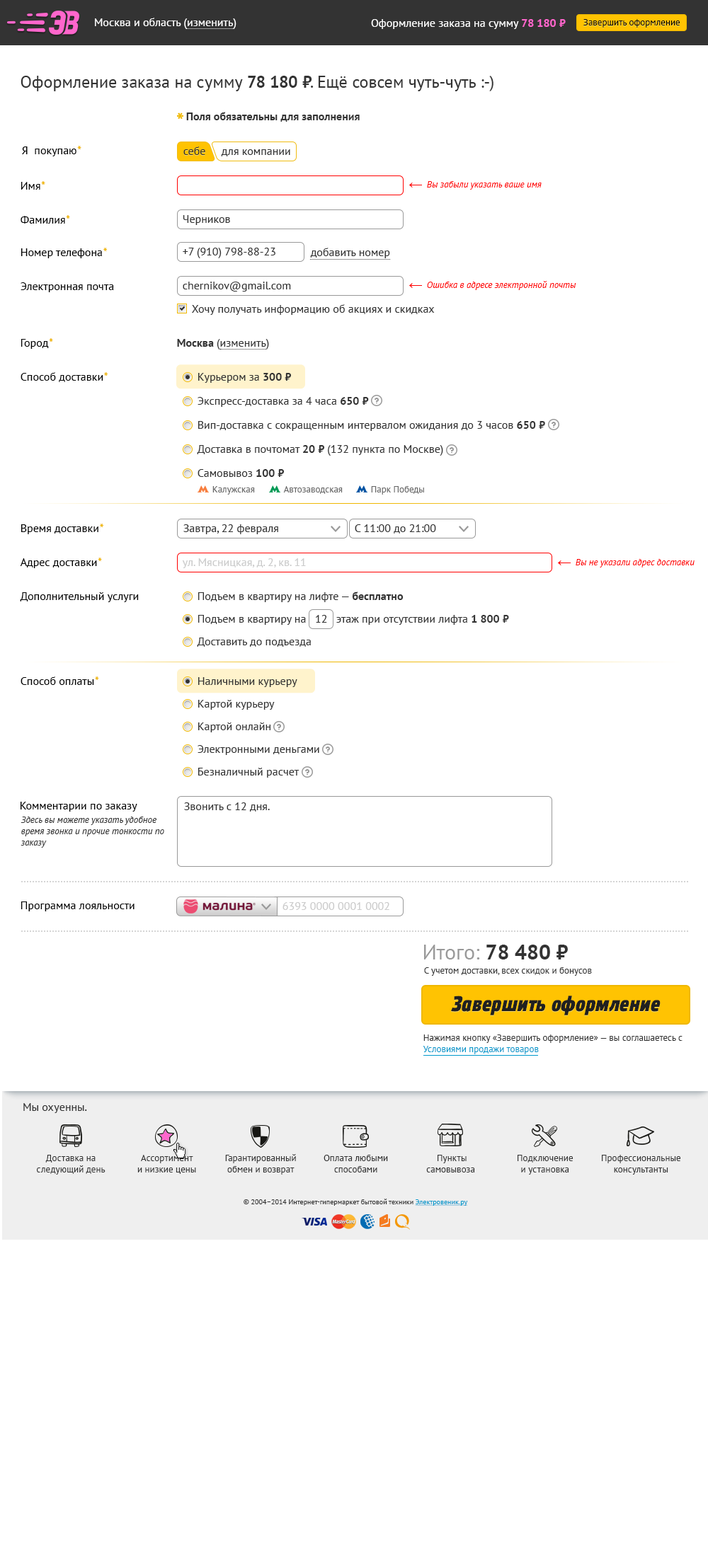
<style>
.page{position:relative;width:708px;height:1568px;background:#ffffff}
.page>*{position:absolute;margin:0}
.t1{font:11.3px "PTSans-Regular";color:#ffffff}
.t2{font:11.3px "PTSans-Bold";color:#ff66cc}
.t3{font:9.2px "PTSans-Regular";color:#000000}
.t4{font:17px "PTSans-Regular";color:#333333}
.t5{font:17px "PTSans-Bold";color:#333333}
.t6{font:11.3px "PTSans-Bold";color:#333333}
.t7{font:11.3px "PTSans-Regular";color:#000000}
.t8{font:11.3px "PTSans-BoldItalic";color:#efb700}
.t9{font:11.3px "PTSans-Regular";color:#333333}
.t10{font:9.2px "PTSans-Italic";color:#ff0000}
.t11{font:9.2px "PTSans-Regular";color:#666666}
.t12{font:11.3px "PTSans-Regular";color:#cccccc}
.t13{font:9.2px/11.3px "PTSans-Italic";color:#333333}
.t14{font:21.2px "PTSans-Bold";color:#333333}
.t15{font:21.2px "PTSans-Regular";color:#999999}
.t16{font:9.2px "PTSans-Regular";color:#333333}
.t17{font:21.2px "EtelkaNarrowMedium-BoldItalic";letter-spacing:0.025em;color:#202020}
.t18{font:9.2px/11.3px "PTSans-Regular";color:#333333}
.t19{font:9.2px/11.3px "PTSans-Regular";color:#0099cc}
.t20{font:9.2px/11.4px "PTSans-Regular";color:#333333}
.t21{font:7.1px "PTSans-Regular";color:#333333}
.t22{font:7.1px "PTSans-Regular";color:#0099cc;text-decoration:underline}
</style>
<div class="page">
<p class="t1" style="left:95px;top:18px;width:141px;height:11px">Москва и область (изменить)</p>
<p class="t1" style="left:371px;top:19px;width:194px;height:10px">Оформление заказа на сумму <span class="t2">78 180 ⃏</span></p>
<p class="t3" style="left:583px;top:19px;width:97px;height:9px">Завершить оформление</p>
<p class="t4" style="left:21px;top:76px;width:472px;height:15px">Оформление заказа на сумму <span class="t5">78 180 ⃏</span>. Ещё совсем чуть-чуть :-)</p>
<p class="t6" style="left:186px;top:112px;width:173px;height:10px">Поля обязательны для заполнения</p>
<p class="t7" style="left:22px;top:146px;width:59px;height:10px">Я  покупаю<span class="t8">*</span></p>
<p class="t9" style="left:183px;top:146px;width:22px;height:9px">себе</p>
<p class="t9" style="left:221px;top:149px;width:69px;height:7px">для компании</p>
<p class="t7" style="left:21px;top:181px;width:24px;height:9px">Имя<span class="t8">*</span></p>
<p class="t10" style="left:427px;top:181px;width:114px;height:9px">Вы забыли указать ваше имя</p>
<p class="t7" style="left:21px;top:215px;width:49px;height:9px">Фамилия<span class="t8">*</span></p>
<p class="t9" style="left:183px;top:215px;width:47px;height:10px">Черников</p>
<p class="t7" style="left:21px;top:248px;width:87px;height:10px">Номер телефона<span class="t8">*</span></p>
<p class="t9" style="left:183px;top:248px;width:92px;height:10px">+7 (910) 798-88-23</p>
<p class="t9" style="left:310px;top:248px;width:80px;height:10px">добавить номер</p>
<p class="t9" style="left:183px;top:282px;width:108px;height:10px">chernikov@gmail.com</p>
<p class="t10" style="left:427px;top:281px;width:149px;height:9px">Ошибка в адресе электронной почты</p>
<p class="t7" style="left:21px;top:282px;width:93px;height:10px">Электронная почта</p>
<p class="t9" style="left:192px;top:304px;width:242px;height:11px">Хочу получать информацию об акциях и скидках</p>
<p class="t7" style="left:21px;top:338px;width:32px;height:11px">Город<span class="t8">*</span></p>
<p class="t9" style="left:177px;top:339px;width:92px;height:11px"><span class="t6">Москва </span>(изменить)</p>
<p class="t7" style="left:21px;top:372px;width:87px;height:10px">Способ доставки<span class="t8">*</span></p>
<p class="t9" style="left:198px;top:373px;width:94px;height:10px">Курьером за <span class="t6">300 ⃏</span></p>
<p class="t9" style="left:197px;top:397px;width:172px;height:10px">Экспресс-доставка за 4 часа <span class="t6">650 ⃏</span></p>
<p class="t9" style="left:198px;top:421px;width:347px;height:10px">Вип-доставка с сокращенным интервалом ожидания до 3 часов <span class="t6">650 ⃏</span></p>
<p class="t9" style="left:197px;top:445px;width:246px;height:11px">Доставка в почтомат <span class="t6">20 ⃏ </span>(132 пункта по Москве)</p>
<p class="t9" style="left:197px;top:469px;width:87px;height:8px">Самовывоз <span class="t6">100 ⃏</span></p>
<p class="t11" style="left:212px;top:486px;width:43px;height:9px">Калужская</p>
<p class="t11" style="left:283px;top:486px;width:59px;height:8px">Автозаводская</p>
<p class="t11" style="left:371px;top:486px;width:53px;height:9px">Парк Победы</p>
<p class="t7" style="left:21px;top:524px;width:83px;height:10px">Время доставки<span class="t8">*</span></p>
<p class="t9" style="left:183px;top:524px;width:95px;height:10px">Завтра, 22 февраля</p>
<p class="t9" style="left:354px;top:524px;width:82px;height:10px">С 11:00 до 21:00</p>
<p class="t7" style="left:20px;top:558px;width:82px;height:10px">Адрес доставки<span class="t8">*</span></p>
<p class="t12" style="left:182px;top:558px;width:124px;height:10px">ул. Мясницкая, д. 2, кв. 11</p>
<p class="t10" style="left:575px;top:559px;width:119px;height:8px">Вы не указали адрес доставки</p>
<p class="t7" style="left:20px;top:592px;width:119px;height:10px">Дополнительный услуги</p>
<p class="t9" style="left:198px;top:592px;width:205px;height:10px">Подъем в квартиру на лифте — <span class="t6">бесплатно</span></p>
<p class="t9" style="left:198px;top:615px;width:108px;height:10px">Подъем в квартиру на</p>
<p class="t9" style="left:316px;top:615px;width:11px;height:8px">12</p>
<p class="t9" style="left:336px;top:615px;width:173px;height:10px">этаж при отсутствии лифта <span class="t6">1 800 ⃏</span></p>
<p class="t9" style="left:197px;top:638px;width:114px;height:9px">Доставить до подъезда</p>
<p class="t7" style="left:21px;top:676px;width:78px;height:9px">Способ оплаты<span class="t8">*</span></p>
<p class="t9" style="left:198px;top:677px;width:99px;height:10px">Наличными курьеру</p>
<p class="t9" style="left:198px;top:700px;width:77px;height:10px">Картой курьеру</p>
<p class="t9" style="left:198px;top:722px;width:72px;height:10px">Картой онлайн</p>
<p class="t9" style="left:197px;top:745px;width:122px;height:10px">Электронными деньгами</p>
<p class="t9" style="left:198px;top:768px;width:101px;height:10px">Безналичный расчет</p>
<p class="t7" style="left:21px;top:802px;width:116px;height:10px">Комментарии по заказу</p>
<p class="t9" style="left:184px;top:802px;width:86px;height:10px">Звонить с 12 дня.</p>
<p class="t13" style="left:21px;top:817px;width:143px;height:31px">Здесь вы можете указать удобное<br>время звонка и прочие тонкости по<br>заказу</p>
<p class="t7" style="left:21px;top:901px;width:113px;height:10px">Программа лояльности</p>
<p class="t12" style="left:282px;top:902px;width:107px;height:8px">6393 0000 0001 0002</p>
<p class="t14" style="left:424px;top:945px;width:143px;height:14px"><span class="t15">Итого: </span>78 480 ⃏</p>
<p class="t16" style="left:424px;top:967px;width:168px;height:9px">С учетом доставки, всех скидок и бонусов</p>
<p class="t17" style="left:451px;top:996px;width:209px;height:19px">Завершить оформление</p>
<p class="t18" style="left:422px;top:1034px;width:260px;height:20px">Нажимая кнопку «Завершить оформление» — вы соглашаетесь с<br><span class="t19">Условиями продажи товаров</span></p>
<p class="t9" style="left:23px;top:1103px;width:64px;height:10px">Мы охуенны.</p>
<p class="t20" style="left:37px;top:1155px;width:68px;height:20px;text-align:center">Доставка на<br>следующий день</p>
<p class="t18" style="left:137px;top:1155px;width:59px;height:19px;text-align:center">Ассортимент<br>и низкие цены</p>
<p class="t20" style="left:225px;top:1154px;width:71px;height:21px;text-align:center">Гарантированный<br>обмен и возврат</p>
<p class="t20" style="left:323px;top:1155px;width:65px;height:17px;text-align:center">Оплата любыми<br>способами</p>
<p class="t18" style="left:426px;top:1155px;width:49px;height:17px;text-align:center">Пункты<br>самовывоза</p>
<p class="t18" style="left:517px;top:1155px;width:56px;height:20px;text-align:center">Подключение<br>и установка</p>
<p class="t20" style="left:601px;top:1155px;width:80px;height:20px;text-align:center">Профессиональные<br>консультанты</p>
<p class="t21" style="left:243px;top:1199px;width:225px;height:7px">© 2004–2014 Интернет-гипермаркет бытовой техники <span class="t22">Электровеник.ру</span></p>
</div>
